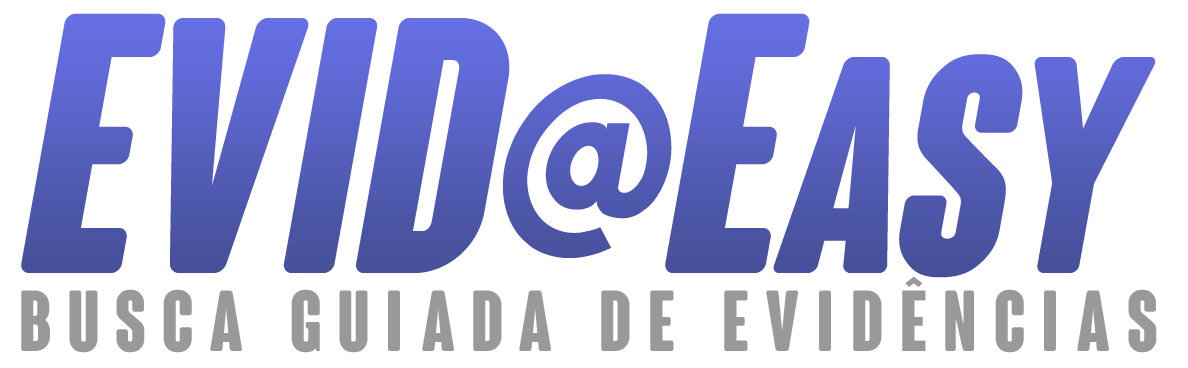
<style>
.page{position:relative;width:1188px;height:368px;background:#ffffff}
.page>*{position:absolute;margin:0}
.t1{font:360px "ColunaRounded-CondensedBold"}
.t2{font:365.8px "ColunaRounded-CondensedBold"}
.t3{font:304.8px "ColunaRounded-CondensedBold"}
.t4{font:84px "ColunaRounded-CondensedBold";letter-spacing:0.2em;color:#999999}
</style>
<div class="page">
<p class="t1" style="left:21px;top:13px;width:1135px;height:265px"><span class="t2">E</span>vid<span class="t3">@</span><span class="t2">E</span><span class="t3">asy</span></p>
<p class="t4" style="left:21px;top:276px;width:1136px;height:77px">Busca Guiada de Evidências</p>
</div>
